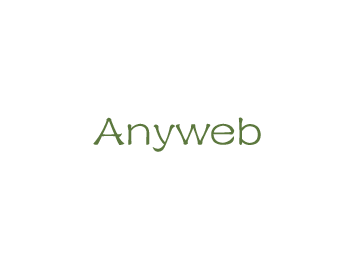
<style>
.page{position:relative;width:360px;height:270px;background:#ffffff}
.page>*{position:absolute;margin:0}
.t1{font:48px "FZSTK--GBK1-0";color:#5c783e}
</style>
<div class="page">
<p class="t1" style="left:93px;top:117px;width:168px;height:35px">Anyweb</p>
</div>
